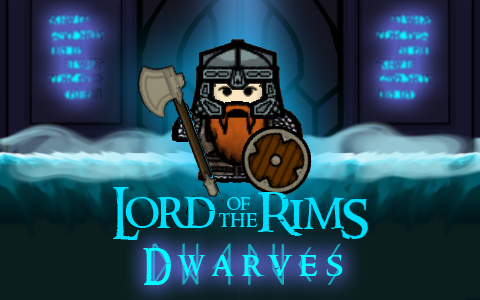
<style>
.page{position:relative;width:480px;height:300px}
.page>*{position:absolute;margin:0}
.t1{font:49.9px "RingbearerMedium";color:#00defe}
.t2{font:20.7px "RingbearerMedium";color:#00defe}
.t3{font:22.8px "RingbearerMedium";color:#00defe}
.t4{font:50.4px "RunishQuillMK-Medium";scale:0.64 1}
.t5{font:34.9px "RingbearerMedium";color:#00fcff}
</style>
<div class="page">
<p class="t1" style="left:113px;top:187px;width:102px;height:53px">Lord</p>
<p class="t2" style="left:227px;top:197px;width:23px;height:13px">of</p>
<p class="t1" style="left:257px;top:192px;width:87px;height:44px">Rim</p>
<p class="t3" style="left:218px;top:213px;width:40px;height:14px">the</p>
<p class="t4" style="left:152px;top:243px;width:189px;height:43px">D w a r v e s</p>
<p class="t5" style="left:143px;top:248px;width:200px;height:37px">D w a r v e s</p>
</div>
